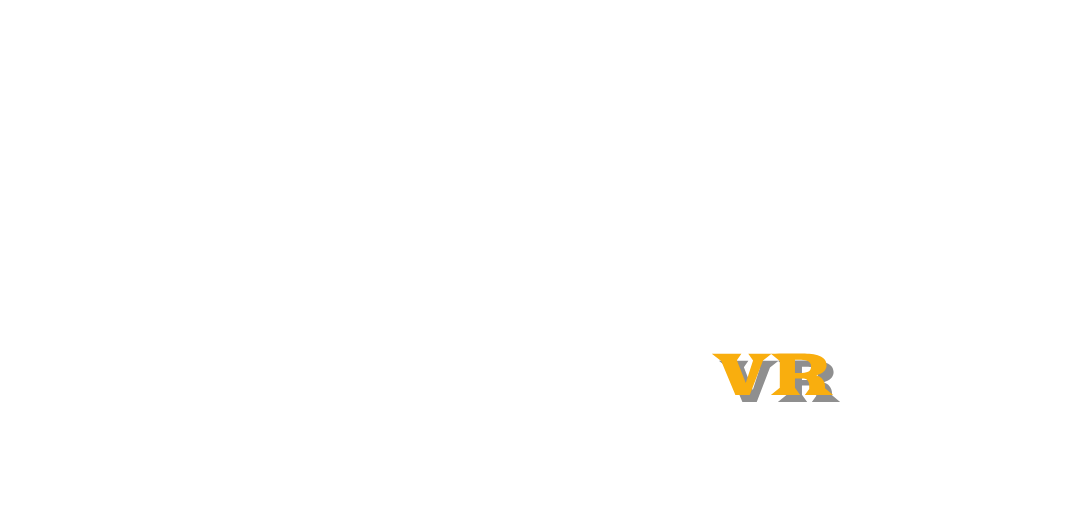
<style>
.page{position:relative;width:1080px;height:512px;background:#ffffff}
.page>*{position:absolute;margin:0}
.t1{font:58.9px "Goblin";color:#f9ae0e}
</style>
<div class="page">
<p class="t1" style="left:712px;top:353px;width:122px;height:42px">VR</p>
</div>
